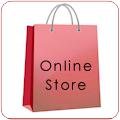
<style>
.page{position:relative;width:120px;height:120px;background:#ffffff}
.page>*{position:absolute;margin:0}
.t1{font:14px/19px "CenturyGothic";letter-spacing:0.121em;color:#000000}
</style>
<div class="page">
<p class="t1" style="left:40px;top:60px;width:52px;height:30px">Online<br> Store</p>
</div>
